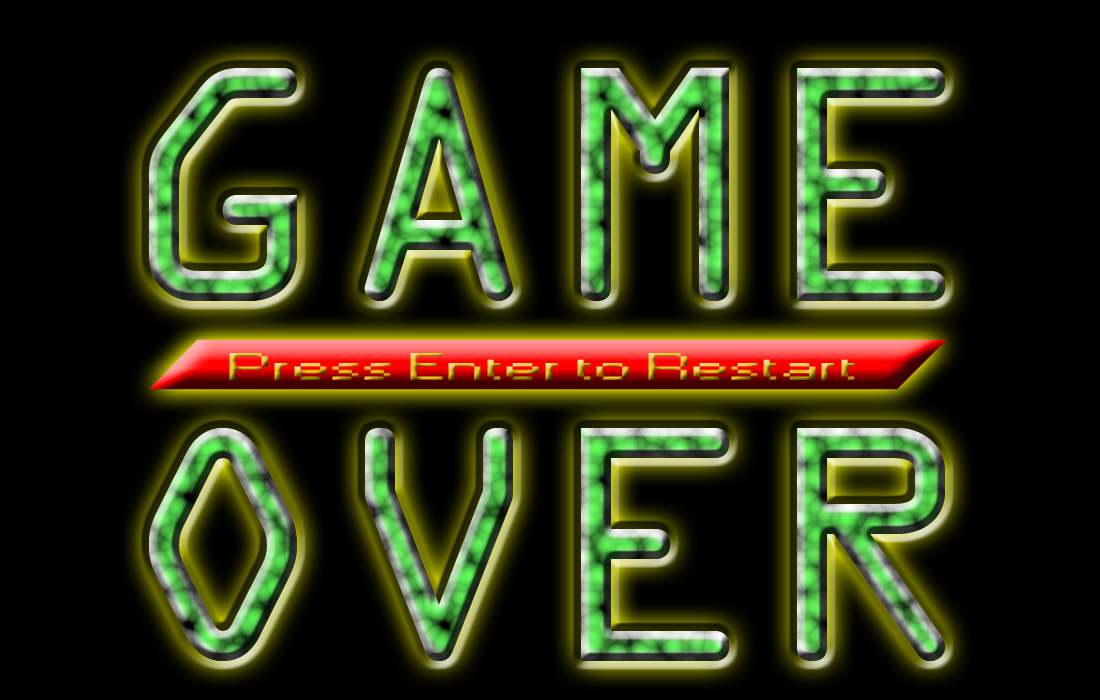
<style>
.page{position:relative;width:1100px;height:700px;background:#000000}
.page>*{position:absolute;margin:0}
.t1{font:300px "OCRAStd"}
.t2{font:36px "Small Fonts";scale:2.29 1}
</style>
<div class="page">
<p class="t1" style="left:149px;top:67px;width:797px;height:594px;text-align:center">GAME<br>OVER</p>
<p class="t2" style="left:229px;top:353px;width:626px;height:27px">Press Enter to Restart</p>
</div>
